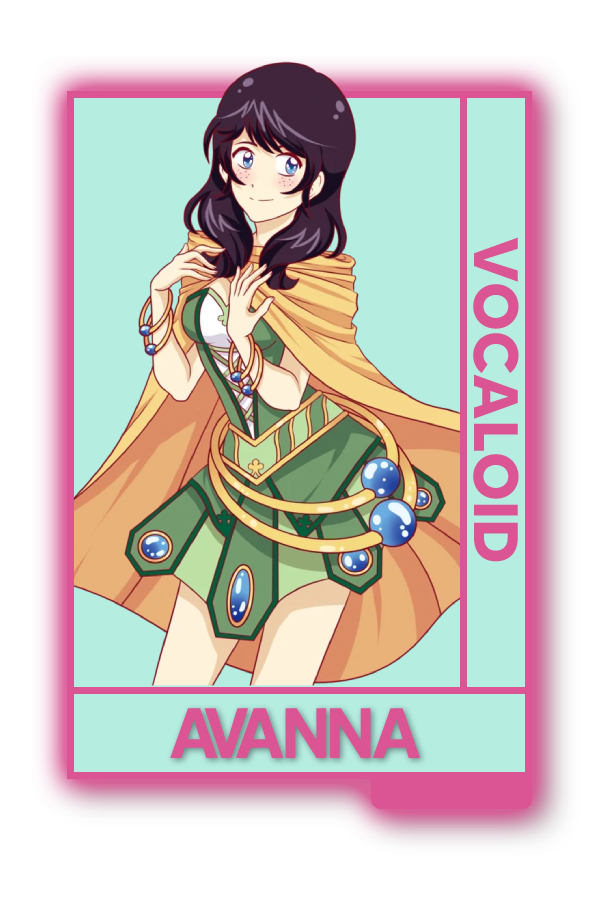
<style>
.page{position:relative;width:600px;height:900px;background:#b5ede1}
.page>*{position:absolute;margin:0}
.t1{font:62.5px "MADETOMMY-Bold";color:#db5493}
.t2{font:75px "CoolveticaRg-Regular";color:#db5493}
</style>
<div class="page">
<p class="t1" style="left:473px;top:237px;width:46px;height:325px;rotate:90deg">VOCALOID</p>
<p class="t2" style="left:170px;top:708px;width:251px;height:50px">AVANNA</p>
</div>
